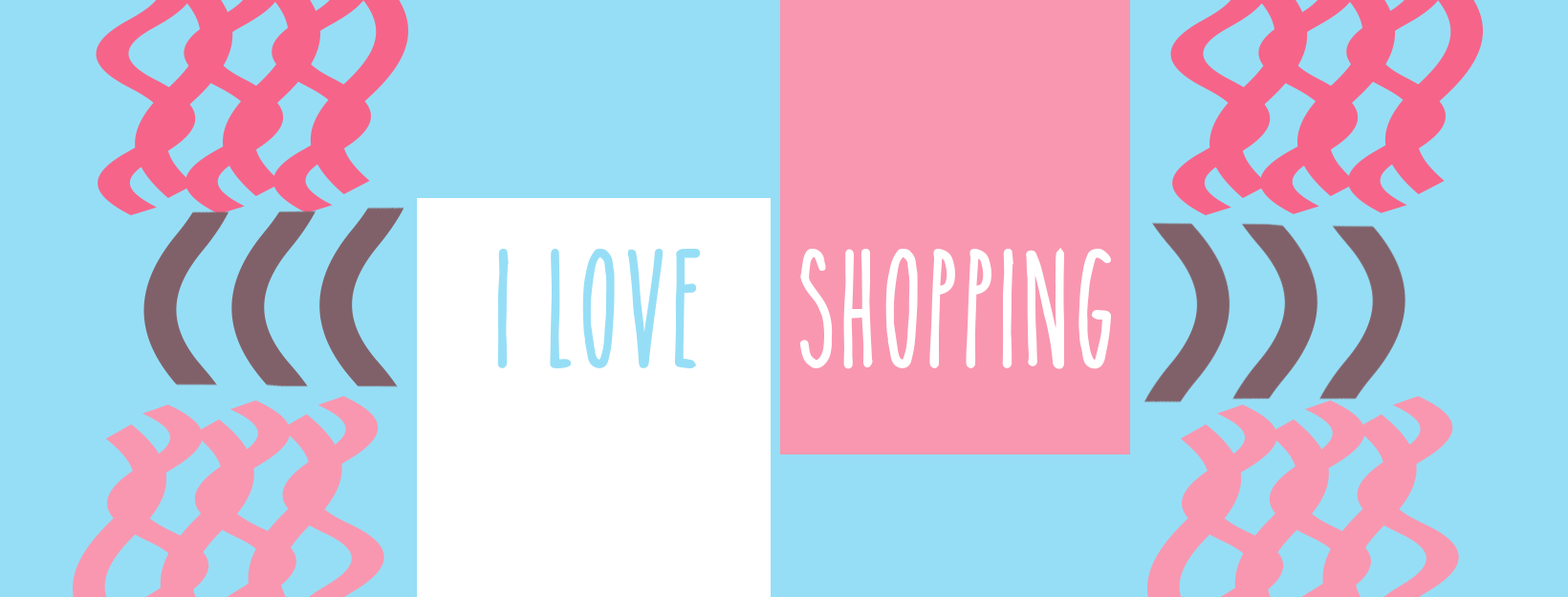
<style>
.page{position:relative;width:1568px;height:597px;background:#96def6}
.page>*{position:absolute;margin:0}
.t1{font:114.7px "TheSkinnybold";color:#96def6}
.t2{font:114.7px "TheSkinnybold";color:#ffffff}
</style>
<div class="page">
<p class="t1" style="left:497px;top:248px;width:204px;height:120px">i Love</p>
<p class="t2" style="left:799px;top:248px;width:312px;height:121px">Shopping</p>
</div>
